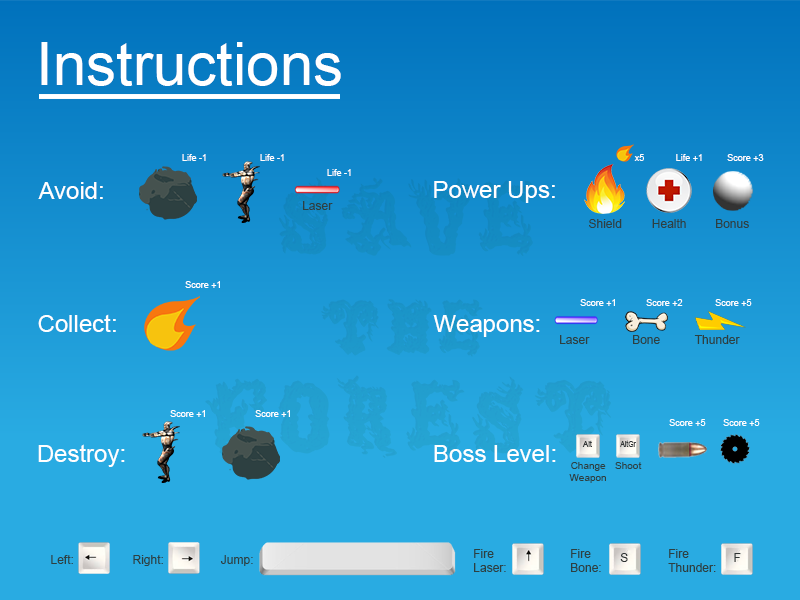
<style>
.page{position:relative;width:800px;height:600px;background:#29abe2}
.page>*{position:absolute;margin:0}
.t1{font:60px "ArialMT";color:#ffffff}
.t2{font:9px "ArialMT";color:#ffffff}
.t3{font:24px "ArialMT";color:#ffffff}
.t4{font:12px "ArialMT";color:#2d4041}
.t5{font:7.5px "ArialMT";color:#313535}
.t6{font:7.6px "ArialMT";color:#313535;scale:0.9 1}
.t7{font:10px "ArialMT";color:#2d4041}
.t8{font:12px "ArialMT";color:#313535}
</style>
<div class="page">
<p class="t1" style="left:41px;top:42px;width:300px;height:44px">Instructions</p>
<p class="t2" style="left:182px;top:154px;width:24px;height:7px">Life -1</p>
<p class="t2" style="left:260px;top:154px;width:24px;height:7px">Life -1</p>
<p class="t2" style="left:634px;top:154px;width:10px;height:7px">x5</p>
<p class="t2" style="left:676px;top:154px;width:26px;height:7px">Life +1</p>
<p class="t2" style="left:727px;top:154px;width:37px;height:7px">Score +3</p>
<p class="t2" style="left:327px;top:169px;width:24px;height:7px">Life -1</p>
<p class="t3" style="left:38px;top:182px;width:65px;height:17px">Avoid:</p>
<p class="t3" style="left:434px;top:181px;width:121px;height:22px">Power Ups:</p>
<p class="t4" style="left:303px;top:201px;width:30px;height:9px">Laser</p>
<p class="t4" style="left:589px;top:219px;width:33px;height:9px">Shield</p>
<p class="t4" style="left:652px;top:219px;width:34px;height:9px">Health</p>
<p class="t4" style="left:716px;top:219px;width:33px;height:9px">Bonus</p>
<p class="t2" style="left:185px;top:281px;width:35px;height:7px">Score +1</p>
<p class="t2" style="left:580px;top:299px;width:35px;height:7px">Score +1</p>
<p class="t2" style="left:646px;top:299px;width:37px;height:7px">Score +2</p>
<p class="t2" style="left:715px;top:299px;width:37px;height:7px">Score +5</p>
<p class="t3" style="left:38px;top:314px;width:78px;height:18px">Collect:</p>
<p class="t3" style="left:433px;top:315px;width:107px;height:22px">Weapons:</p>
<p class="t4" style="left:560px;top:335px;width:30px;height:9px">Laser</p>
<p class="t4" style="left:633px;top:335px;width:27px;height:9px">Bone</p>
<p class="t4" style="left:694px;top:335px;width:46px;height:9px">Thunder</p>
<p class="t2" style="left:170px;top:410px;width:35px;height:7px">Score +1</p>
<p class="t2" style="left:255px;top:410px;width:35px;height:7px">Score +1</p>
<p class="t2" style="left:669px;top:419px;width:37px;height:7px">Score +5</p>
<p class="t2" style="left:723px;top:419px;width:37px;height:7px">Score +5</p>
<p class="t3" style="left:38px;top:444px;width:87px;height:23px">Destroy:</p>
<p class="t3" style="left:434px;top:445px;width:122px;height:17px">Boss Level:</p>
<p class="t5" style="left:582px;top:440px;width:10px;height:7px">Alt</p>
<p class="t6" style="left:620px;top:440px;width:16px;height:7px">AltGr</p>
<p class="t7" style="left:569px;top:462px;width:37px;height:21px;text-align:center">Change<br>Weapon</p>
<p class="t7" style="left:615px;top:462px;width:27px;height:7px">Shoot</p>
<p class="t4" style="left:51px;top:555px;width:22px;height:9px">Left:</p>
<p class="t4" style="left:133px;top:555px;width:30px;height:11px">Right:</p>
<p class="t4" style="left:220px;top:555px;width:33px;height:11px">Jump:</p>
<p class="t4" style="left:474px;top:549px;width:32px;height:23px">Fire<br>Laser:</p>
<p class="t4" style="left:571px;top:549px;width:30px;height:23px">Fire<br>Bone:</p>
<p class="t8" style="left:620px;top:553px;width:8px;height:9px">S</p>
<p class="t4" style="left:668px;top:549px;width:48px;height:23px">Fire<br>Thunder:</p>
<p class="t8" style="left:734px;top:553px;width:7px;height:9px">F</p>
</div>
